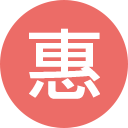
<style>
.page{position:relative;width:128px;height:128px;background:#ec6c67}
.page>*{position:absolute;margin:0}
.t1{font:81px "MicrosoftJhengHeiBold";color:#ffffff}
</style>
<div class="page">
<p class="t1" style="left:29px;top:28px;width:71px;height:71px">惠</p>
</div>
